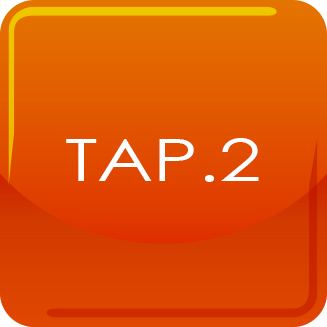
<style>
.page{position:relative;width:327px;height:327px}
.page>*{position:absolute;margin:0}
.t1{font:58.3px "CenturyGothic";color:#ffffff;scale:1.3 1}
</style>
<div class="page">
<p class="t1" style="left:66px;top:138px;width:193px;height:44px">TAP.2</p>
</div>
